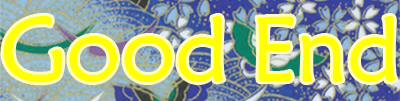
<style>
.page{position:relative;width:400px;height:101px}
.page>*{position:absolute;margin:0}
.t1{font:90.7px "STXinwei";color:#ffff00}
</style>
<div class="page">
<p class="t1" style="left:3px;top:16px;width:393px;height:67px">Good End</p>
</div>
